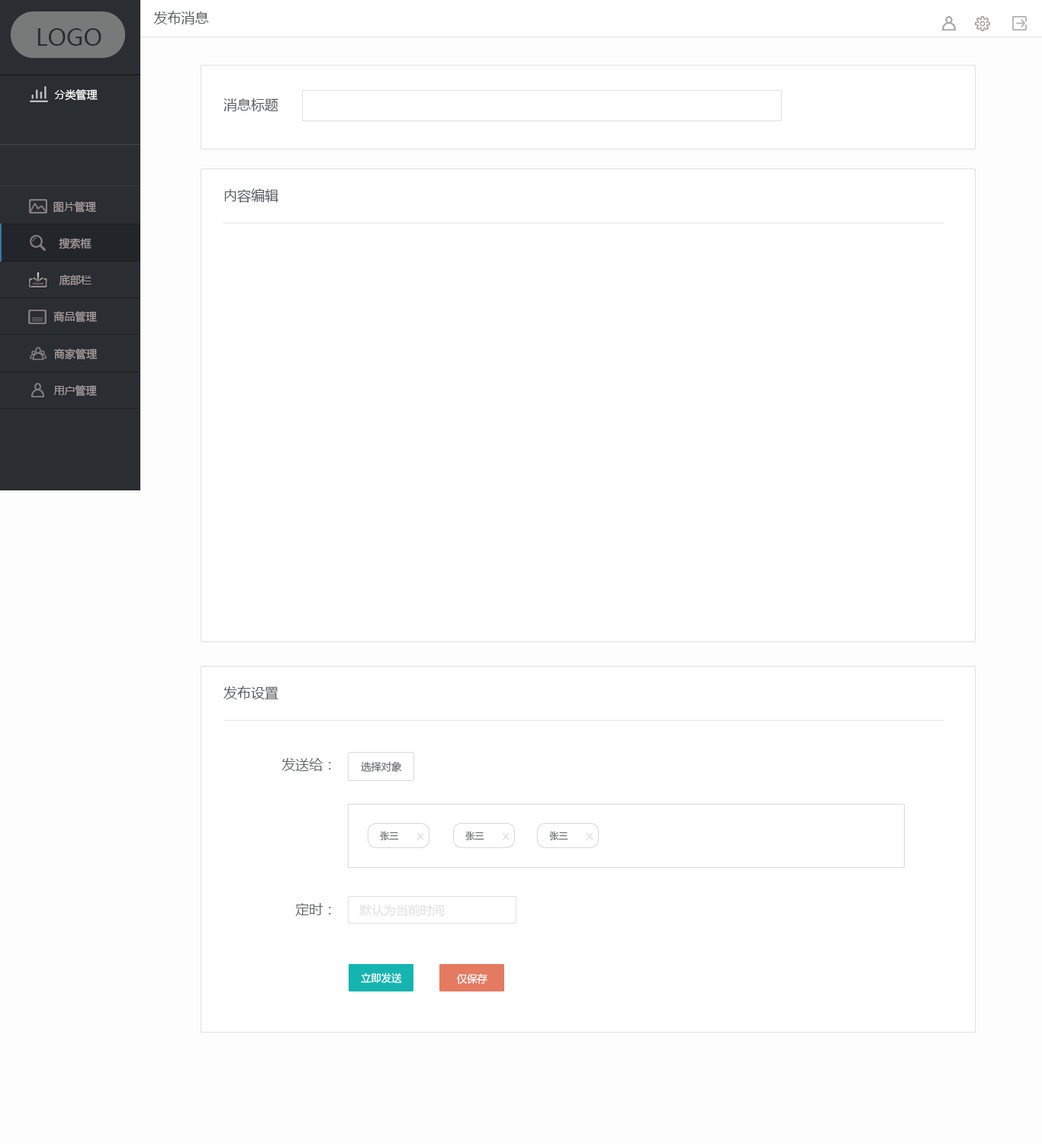
<style>
.page{position:relative;width:1042px;height:1144px;background:#ffffff}
.page>*{position:absolute;margin:0}
.t1{font:13.7px "MicrosoftYaHei";color:#555a5f}
.t2{font:22.9px "MicrosoftYaHei";color:#2a2d32}
.t3{font:10.7px "MicrosoftYaHei";color:#ffffff}
.t4{font:10.7px "MicrosoftYaHei";color:#ab9f9f}
.t5{font:13.7px "MicrosoftYaHei";color:#61666c}
.t6{font:10.1px "MicrosoftYaHei";color:#61666c}
.t7{font:9.2px "MicrosoftYaHei";color:#61666c}
.t8{font:12px "MicrosoftYaHei";color:#e0e0e0}
.t9{font:10.1px "MicrosoftYaHei";color:#ffffff}
</style>
<div class="page">
<p class="t1" style="left:153px;top:11px;width:56px;height:13px">发布消息</p>
<p class="t2" style="left:37px;top:28px;width:64px;height:18px">LOGO</p>
<p class="t3" style="left:54px;top:89px;width:44px;height:12px">分类管理</p>
<p class="t1" style="left:224px;top:98px;width:54px;height:13px">消息标题</p>
<p class="t1" style="left:224px;top:188px;width:54px;height:15px">内容编辑</p>
<p class="t4" style="left:53px;top:201px;width:43px;height:12px">图片管理</p>
<p class="t4" style="left:59px;top:238px;width:33px;height:11px">搜索框</p>
<p class="t4" style="left:59px;top:275px;width:33px;height:10px">底部栏</p>
<p class="t4" style="left:53px;top:311px;width:44px;height:12px">商品管理</p>
<p class="t4" style="left:54px;top:349px;width:44px;height:11px">商家管理</p>
<p class="t4" style="left:53px;top:385px;width:44px;height:12px">用户管理</p>
<p class="t1" style="left:224px;top:686px;width:54px;height:14px">发布设置</p>
<p class="t5" style="left:281px;top:758px;width:50px;height:13px">发送给：</p>
<p class="t6" style="left:361px;top:761px;width:41px;height:11px">选择对象</p>
<p class="t7" style="left:380px;top:832px;width:19px;height:9px">张三</p>
<p class="t7" style="left:465px;top:832px;width:19px;height:9px">张三</p>
<p class="t7" style="left:549px;top:832px;width:19px;height:9px">张三</p>
<p class="t5" style="left:295px;top:903px;width:36px;height:13px">定时：</p>
<p class="t8" style="left:359px;top:904px;width:85px;height:13px">默认为当前时间</p>
<p class="t9" style="left:361px;top:973px;width:41px;height:10px">立即发送</p>
<p class="t9" style="left:457px;top:973px;width:30px;height:11px">仅保存</p>
</div>
